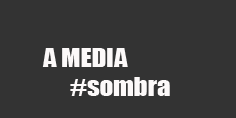
<style>
.page{position:relative;width:236px;height:118px;background:#333333}
.page>*{position:absolute;margin:0}
.t1{font:23.7px "Impact";color:#fcf9f9;scale:1.13 1}
</style>
<div class="page">
<p class="t1" style="left:42px;top:48px;width:128px;height:48px;text-align:center">A MEDIA<br>               #sombra</p>
</div>
